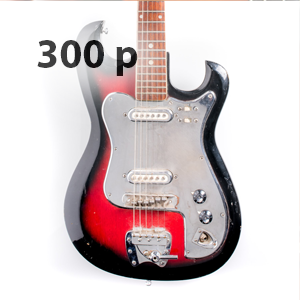
<style>
.page{position:relative;width:300px;height:300px;background:#ffffff}
.page>*{position:absolute;margin:0}
.t1{font:41.7px "MyriadPro-Bold"}
</style>
<div class="page">
<p class="t1" style="left:37px;top:40px;width:101px;height:36px">300 p</p>
</div>
